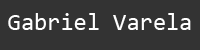
<style>
.page{position:relative;width:200px;height:50px;background:#333333}
.page>*{position:absolute;margin:0}
.t1{font:24px "Consolas";color:#ffffff}
</style>
<div class="page">
<p class="t1" style="left:8px;top:13px;width:183px;height:17px">Gabriel Varela</p>
</div>
